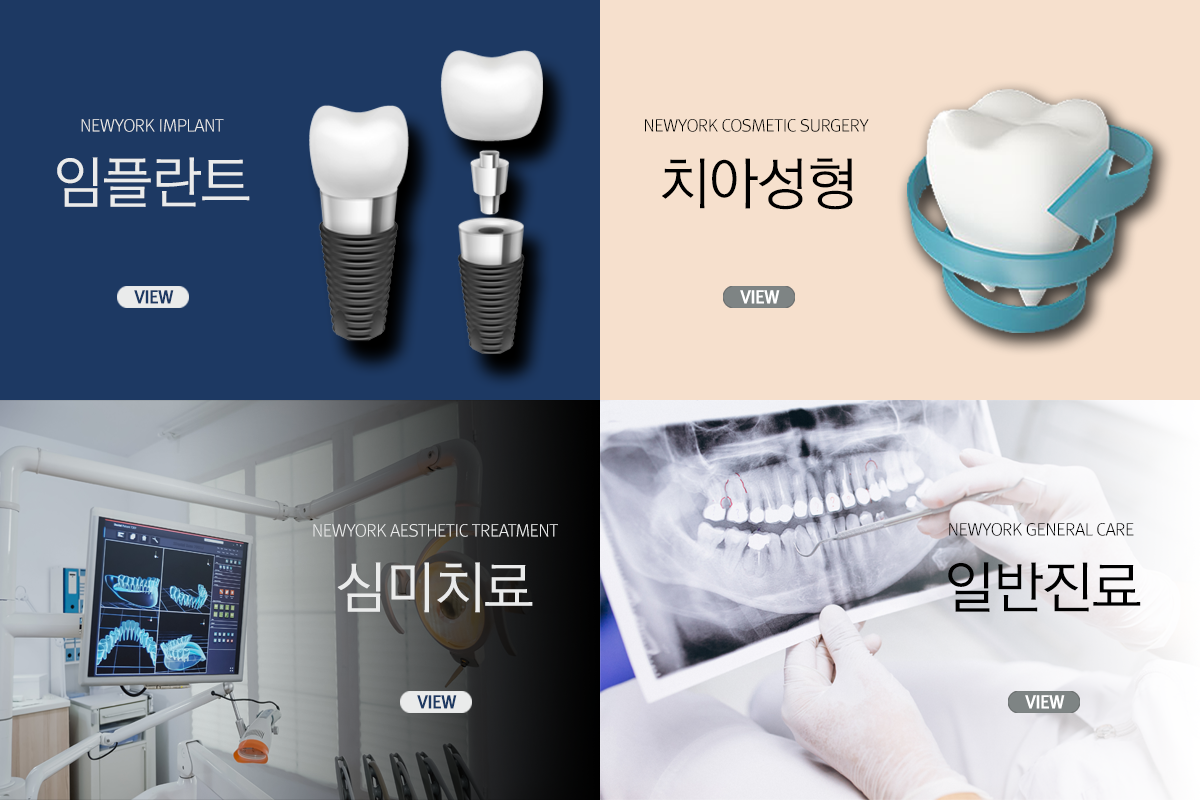
<style>
.page{position:relative;width:1200px;height:800px}
.page>*{position:absolute;margin:0}
.t1{font:16.6px "RixMGoL";letter-spacing:-0.04em;color:#eaebeb}
.t2{font:16.6px "RixMGoL";letter-spacing:-0.04em;color:#000000}
.t3{font:55.7px "RixGoL";letter-spacing:-0.04em;color:#eaebeb;font-weight:bold}
.t4{font:43.4px "RixGoL";letter-spacing:-0.04em;color:#eaebeb}
.t5{font:55.7px "RixGoL";letter-spacing:-0.04em;color:#000000;font-weight:bold}
.t6{font:43.4px "RixGoL";letter-spacing:-0.04em;color:#000000}
.t7{font:17.1px "RixGoB";letter-spacing:-0.04em;color:#1d3963;font-weight:bold;scale:0.96 1}
.t8{font:17.1px "RixGoB";letter-spacing:-0.04em;color:#ffffff;font-weight:bold;scale:0.96 1}
</style>
<div class="page">
<p class="t1" style="left:81px;top:119px;width:143px;height:13px">NEWYORK IMPLANT</p>
<p class="t2" style="left:645px;top:119px;width:224px;height:13px">NEWYORK COSMETIC SURGERY</p>
<p class="t3" style="left:57px;top:157px;width:193px;height:50px"><span class="t4"><br></span>임플란트</p>
<p class="t5" style="left:662px;top:158px;width:191px;height:52px"><span class="t6"><br></span>치아성형</p>
<p class="t7" style="left:134px;top:290px;width:40px;height:14px">VIEW</p>
<p class="t8" style="left:740px;top:290px;width:40px;height:14px">VIEW</p>
<p class="t1" style="left:313px;top:524px;width:245px;height:13px">NEWYORK AESTHETIC TREATMENT</p>
<p class="t2" style="left:949px;top:523px;width:185px;height:13px">NEWYORK GENERAL CARE</p>
<p class="t3" style="left:337px;top:562px;width:196px;height:51px"><span class="t4"><br></span>심미치료</p>
<p class="t5" style="left:948px;top:562px;width:193px;height:50px"><span class="t6"><br></span>일반진료</p>
<p class="t7" style="left:417px;top:695px;width:40px;height:14px">VIEW</p>
<p class="t8" style="left:1025px;top:695px;width:40px;height:14px">VIEW</p>
</div>
